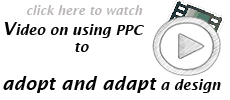
<style>
.page{position:relative;width:230px;height:100px;background:#ffffff}
.page>*{position:absolute;margin:0}
.t1{font:14px "LucidaSans-DemiItalic";color:#040404}
.t2{font:18px "LucidaSans-DemiItalic";color:#040404}
</style>
<div class="page">
<p class="t1" style="left:3px;top:22px;width:218px;height:71px"><span class="t2">V</span>ideo on using PPC  <br>  to <br><br><span class="t2">adopt and adapt</span> a design</p>
</div>
